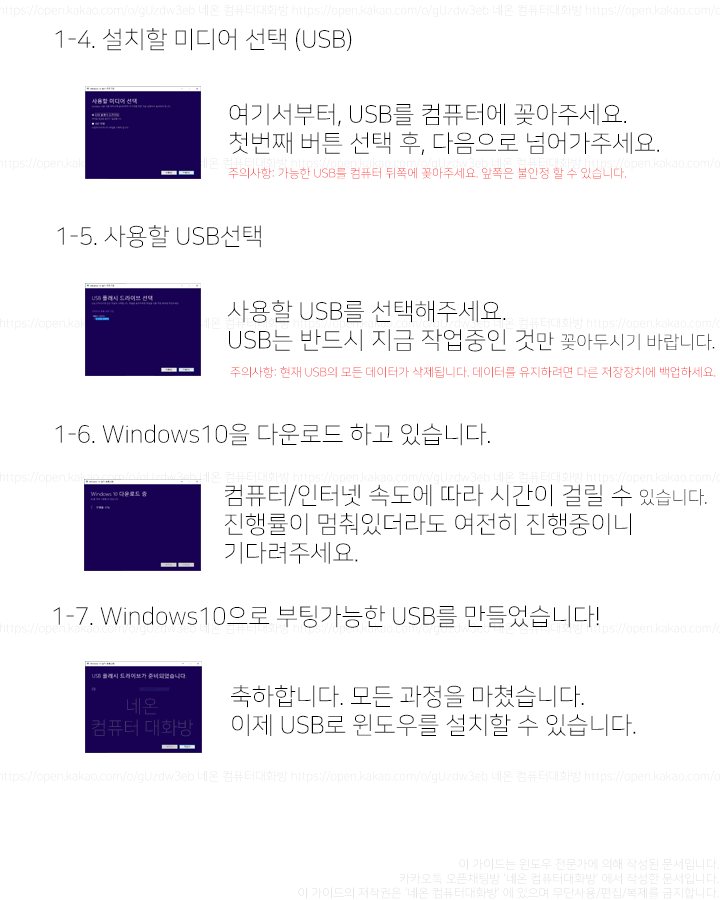
<style>
.page{position:relative;width:720px;height:900px;background:#ffffff}
.page>*{position:absolute;margin:0}
.t1{font:24px "NanumSquareL";color:#000000}
.t2{font:12px "NanumSquareL"}
.t3{font:20px "NanumSquareL";color:#000000}
.t4{font:18px "NanumSquareL";color:#000000}
.t5{font:18px "NanumSquareL";color:#43366b}
</style>
<div class="page">
<p class="t1" style="left:55px;top:28px;width:297px;height:23px">1-4. 설치할 미디어 선택 (USB)</p>
<p class="t1" style="left:229px;top:103px;width:430px;height:52px">여기서부터, USB를 컴퓨터에 꽂아주세요.<br>첫번째 버튼 선택 후, 다음으로 넘어가주세요.</p>
<p class="t2" style="left:228px;top:167px;width:398px;height:12px">주의사항: 가능한 USB를 컴퓨터 뒤쪽에 꽂아주세요. 앞쪽은 불안정 할 수 있습니다.</p>
<p class="t1" style="left:57px;top:225px;width:204px;height:23px">1-5. 사용할 USB선택</p>
<p class="t1" style="left:227px;top:300px;width:488px;height:52px">사용할 USB를 선택해주세요.<br>USB는 반드시 지금 작업중인 것<span class="t3">만 </span><span class="t4">꽂아두시기 바랍니다.</span></p>
<p class="t2" style="left:230px;top:366px;width:486px;height:12px">주의사항: 현재 USB의 모든 데이터가 삭제됩니다. 데이터를 유지하려면 다른 저장장치에 백업하세요.</p>
<p class="t1" style="left:55px;top:423px;width:435px;height:23px">1-6. Windows10을 다운로드 하고 있습니다.</p>
<p class="t1" style="left:224px;top:484px;width:483px;height:80px">컴퓨터/인터넷 속도에 따라 시간이 걸릴 수 <span class="t4">있습니다.<br></span>진행률이 멈춰있더라도 여전히 진행중이니 <br>기다려주세요.</p>
<p class="t1" style="left:53px;top:605px;width:546px;height:23px">1-7. Windows10으로 부팅가능한 USB를 만들었습니다!</p>
<p class="t1" style="left:231px;top:685px;width:405px;height:51px">축하합니다. 모든 과정을 마쳤습니다. <br>이제 USB로 윈도우를 설치할 수 있습니다.</p>
<p class="t5" style="left:92px;top:698px;width:101px;height:39px;text-align:center">네온<br>컴퓨터 대화방</p>
<p class="t2" style="left:298px;top:858px;width:421px;height:41px;text-align:right">이 가이드는 윈도우 전문가에 의해 작성된 문서입니다.<br>카카오톡 오픈채팅방 ‘네온 컴퓨터대화방’ 에서 작성한 문서입니다.<br>이 가이드의 저작권은 ‘네온 컴퓨터대화방’ 에 있으며 무단사용/편집/복제를 금지합니다.</p>
</div>
